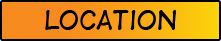
<style>
.page{position:relative;width:221px;height:41px}
.page>*{position:absolute;margin:0}
.t1{font:25px "DigitalStrip";color:#000000}
</style>
<div class="page">
<p class="t1" style="left:45px;top:10px;width:131px;height:20px">location</p>
</div>
